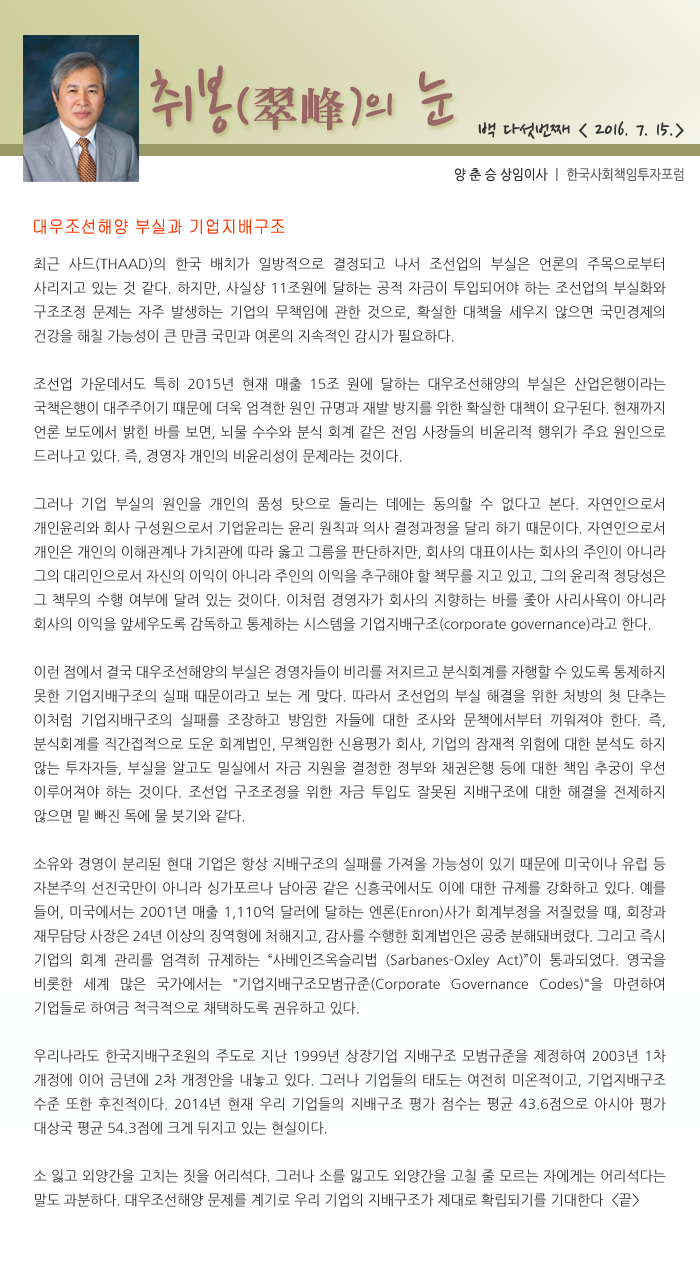
<style>
.page{position:relative;width:700px;height:1276px;background:#ffffff}
.page>*{position:absolute;margin:0}
.t1{font:77.5px "NanumPen";color:#996666}
.t2{font:60px "NanumPen";color:#996666}
.t3{font:48px "H2mjrE";color:#996666}
.t4{font:24px "NanumPen";color:#333333}
.t5{font:14px "NanumGothic";color:#666666;scale:0.9 1}
.t6{font:14px "NanumGothic";color:#333333;scale:0.9 1}
.t7{font:18px "Gulim";color:#ff3300;scale:0.9 1}
.t8{font:14px/24px "NanumGothic";color:#333333}
</style>
<div class="page">
<p class="t1" style="left:150px;top:65px;width:304px;height:69px">취봉<span class="t2">(</span><span class="t3">翠峰</span><span class="t2">)</span><span class="t2">의</span> 눈</p>
<p class="t4" style="left:478px;top:121px;width:206px;height:18px">백 다섯번째 &lt; 2016. 7. 15.&gt;</p>
<p class="t5" style="left:455px;top:168px;width:229px;height:14px"><span class="t6">양 춘 승 상임이사 </span>ㅣ 한국사회책임투자포럼</p>
<p class="t7" style="left:34px;top:219px;width:251px;height:15px">대우조선해양 부실과 기업지배구조</p>
<p class="t8" style="left:34px;top:257px;width:632px;height:950px;text-align:justify">최근 사드(THAAD)의 한국 배치가 일방적으로 결정되고 나서 조선업의 부실은 언론의 주목으로부터 사리지고 있는 것 같다. 하지만, 사실상 11조원에 달하는 공적 자금이 투입되어야 하는 조선업의 부실화와 구조조정 문제는 자주 발생하는 기업의 무책임에 관한 것으로, 확실한 대책을 세우지 않으면 국민경제의 건강을 해칠 가능성이 큰 만큼 국민과 여론의 지속적인 감시가 필요하다.<br><br>조선업 가운데서도 특히 2015년 현재 매출 15조 원에 달하는 대우조선해양의 부실은 산업은행이라는 국책은행이 대주주이기 때문에 더욱 엄격한 원인 규명과 재발 방지를 위한 확실한 대책이 요구된다. 현재까지 언론 보도에서 밝힌 바를 보면, 뇌물 수수와 분식 회계 같은 전임 사장들의 비윤리적 행위가 주요 원인으로 드러나고 있다. 즉, 경영자 개인의 비윤리성이 문제라는 것이다.<br><br>그러나 기업 부실의 원인을 개인의 품성 탓으로 돌리는 데에는 동의할 수 없다고 본다. 자연인으로서 개인윤리와 회사 구성원으로서 기업윤리는 윤리 원칙과 의사 결정과정을 달리 하기 때문이다. 자연인으로서 개인은 개인의 이해관계나 가치관에 따라 옳고 그름을 판단하지만, 회사의 대표이사는 회사의 주인이 아니라 그의 대리인으로서 자신의 이익이 아니라 주인의 이익을 추구해야 할 책무를 지고 있고, 그의 윤리적 정당성은 그 책무의 수행 여부에 달려 있는 것이다. 이처럼 경영자가 회사의 지향하는 바를 좇아 사리사욕이 아니라 회사의 이익을 앞세우도록 감독하고 통제하는 시스템을 기업지배구조(corporate governance)라고 한다. <br><br>이런 점에서 결국 대우조선해양의 부실은 경영자들이 비리를 저지르고 분식회계를 자행할 수 있도록 통제하지 못한 기업지배구조의 실패 때문이라고 보는 게 맞다. 따라서 조선업의 부실 해결을 위한 처방의 첫 단추는 이처럼 기업지배구조의 실패를 조장하고 방임한 자들에 대한 조사와 문책에서부터 끼워져야 한다. 즉, 분식회계를 직간접적으로 도운 회계법인, 무책임한 신용평가 회사, 기업의 잠재적 위험에 대한 분석도 하지 않는 투자자들, 부실을 알고도 밀실에서 자금 지원을 결정한 정부와 채권은행 등에 대한 책임 추궁이 우선 이루어져야 하는 것이다. 조선업 구조조정을 위한 자금 투입도 잘못된 지배구조에 대한 해결을 전제하지 않으면 밑 빠진 독에 물 붓기와 같다.<br><br>소유와 경영이 분리된 현대 기업은 항상 지배구조의 실패를 가져올 가능성이 있기 때문에 미국이나 유럽 등 자본주의 선진국만이 아니라 싱가포르나 남아공 같은 신흥국에서도 이에 대한 규제를 강화하고 있다. 예를 들어, 미국에서는 2001년 매출 1,110억 달러에 달하는 엔론(Enron)사가 회계부정을 저질렀을 때, 회장과 재무담당 사장은 24년 이상의 징역형에 처해지고, 감사를 수행한 회계법인은 공중 분해돼버렸다. 그리고 즉시 기업의 회계 관리를 엄격히 규제하는 “사베인즈옥슬리법 (Sarbanes-Oxley Act)”이 통과되었다. 영국을 비롯한 세계 많은 국가에서는 "기업지배구조모범규준(Corporate Governance Codes)"을 마련하여 기업들로 하여금 적극적으로 채택하도록 권유하고 있다.<br><br>우리나라도 한국지배구조원의 주도로 지난 1999년 상장기업 지배구조 모범규준을 제정하여 2003년 1차 개정에 이어 금년에 2차 개정안을 내놓고 있다. 그러나 기업들의 태도는 여전히 미온적이고, 기업지배구조 수준 또한 후진적이다. 2014년 현재 우리 기업들의 지배구조 평가 점수는 평균 43.6점으로 아시아 평가 대상국 평균 54.3점에 크게 뒤지고 있는 현실이다.<br><br>소 잃고 외양간을 고치는 짓을 어리석다. 그러나 소를 잃고도 외양간을 고칠 줄 모르는 자에게는 어리석다는 말도 과분하다. 대우조선해양 문제를 계기로 우리 기업의 지배구조가 제대로 확립되기를 기대한다  &lt;끝&gt;</p>
</div>
